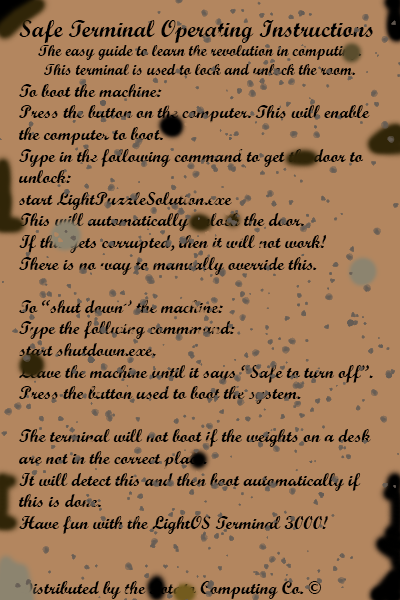
<style>
.page{position:relative;width:400px;height:600px;background:#b3865f}
.page>*{position:absolute;margin:0}
.t1{font:18px "ScriptMTBold";color:#000000}
.t2{font:24px "ScriptMTBold";color:#000000}
.t3{font:16px "ScriptMTBold";color:#000000}
</style>
<div class="page">
<p class="t1" style="left:19px;top:20px;width:354px;height:579px"><span class="t2">Safe Terminal Operating Instructions<br></span><span class="t3">The easy guide to learn the revolution in computing.<br>This terminal is used to lock and unlock the room.<br></span>To boot the machine:<br>Press the button on the computer. This will enable the computer to boot.<br>Type in the following command to get the door to unlock:<br>start LightPuzzleSolution.exe<br>This will automatically unlock the door.<br>If this gets corrupted, then it will not work!<br>There is no way to manually override this.<br><br>To “shut down” the machine:<br>Type the follwing commmand:<br>start shutdown.exe.<br>Leave the machine until it says “Safe to turn off”.<br>Press the button used to boot the system.<br><br>The terminal will not boot if the weights on a desk are not in the correct place. <br>It will detect this and then boot automatically if this is done.<br>Have fun with the LightOS Terminal 3000!<br><br><br>Distributed by the Potato Computing Co. ©</p>
</div>
